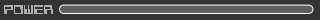
<style>
.page{position:relative;width:320px;height:20px;background:#333333}
.page>*{position:absolute;margin:0}
.t1{font:10px "G7-Silkworm-TTF";color:#aeaeae}
</style>
<div class="page">
<p class="t1" style="left:4px;top:5px;width:49px;height:9px">POWER</p>
</div>
